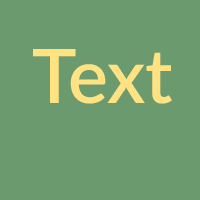
<style>
.page{position:relative;width:200px;height:200px;background:#6a9a6e}
.page>*{position:absolute;margin:0}
.t1{font:75px "Lato-Semibold";color:#ffe383}
</style>
<div class="page">
<p class="t1" style="left:33px;top:49px;width:139px;height:55px">Text</p>
</div>
